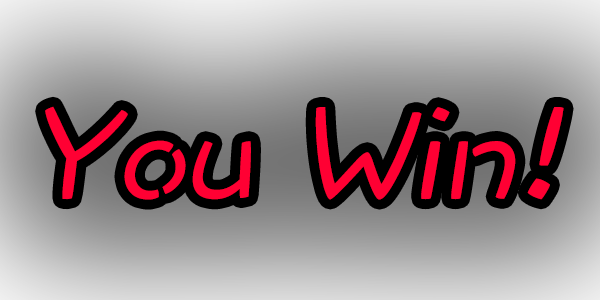
<style>
.page{position:relative;width:600px;height:300px}
.page>*{position:absolute;margin:0}
.t1{font:137px "DFWaWaTC-W5";color:#ff0033;font-style:italic}
</style>
<div class="page">
<p class="t1" style="left:45px;top:106px;width:519px;height:94px">You Win!</p>
</div>
